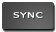
<style>
.page{position:relative;width:56px;height:32px}
.page>*{position:absolute;margin:0}
.t1{font:7.2px "DejaVuSansCondensed";color:#ffffff;font-weight:bold;scale:1.67 1}
</style>
<div class="page">
<p class="t1" style="left:13px;top:12px;width:30px;height:6px">SYNC</p>
</div>
